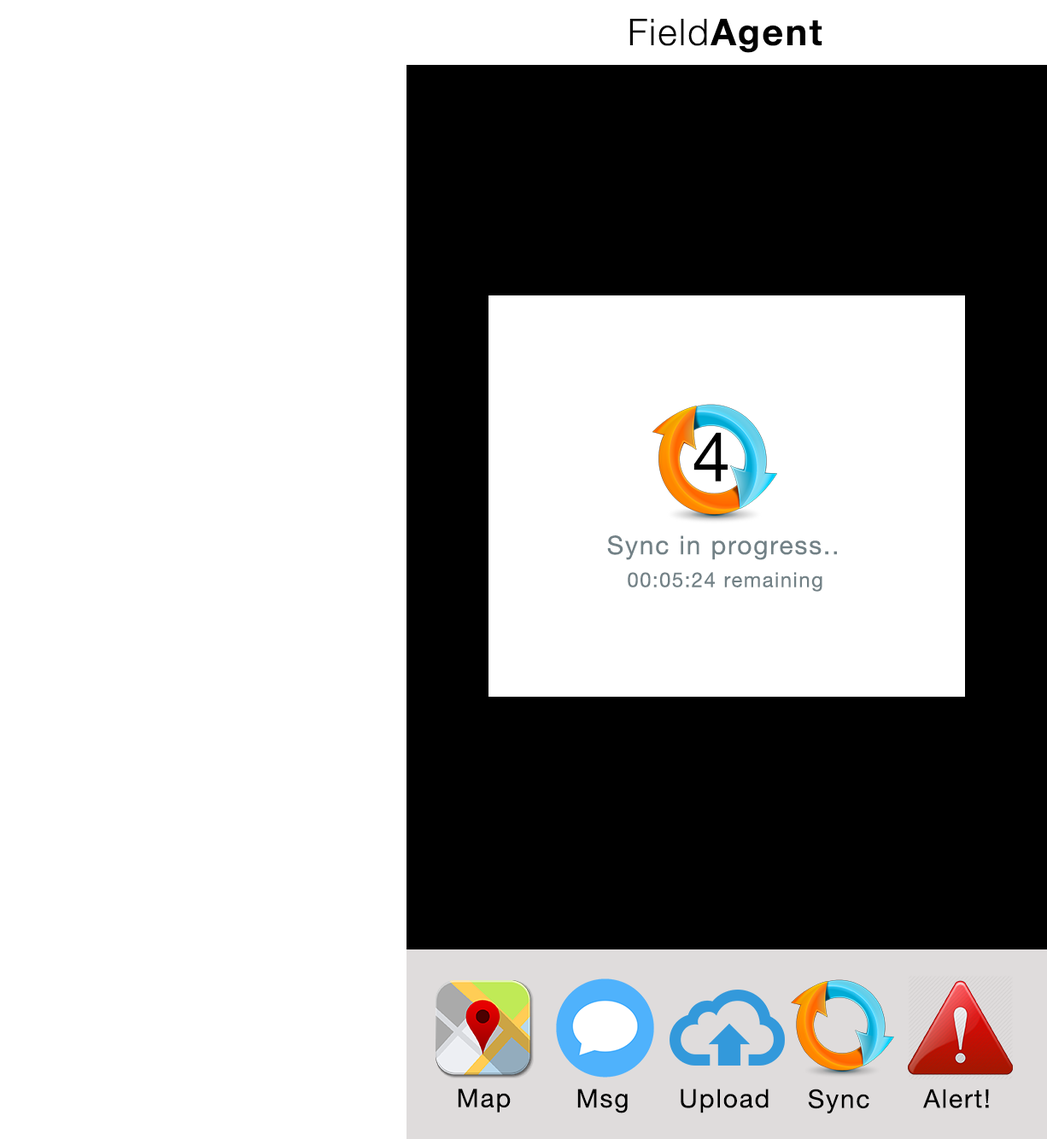
<style>
.page{position:relative;width:1047px;height:1139px;background:#ffffff}
.page>*{position:absolute;margin:0}
.t1{font:36.9px "HelveticaNeue-Light";letter-spacing:0.06em;color:#000000}
.t2{font:36.9px "HelveticaNeue-Bold";letter-spacing:0.06em;color:#000000}
.t3{font:68.3px "HelveticaNeue";letter-spacing:0.06em;color:#000000}
.t4{font:25.6px "HelveticaNeue";letter-spacing:0.06em;color:#728186}
.t5{font:25.6px "HelveticaNeue";letter-spacing:0.06em;color:#ffffff}
.t6{font:20.5px "HelveticaNeue";letter-spacing:0.06em;color:#728186}
.t7{font:25.6px "HelveticaNeue";letter-spacing:0.06em;color:#000000}
</style>
<div class="page">
<p class="t1" style="left:629px;top:19px;width:193px;height:34px">Field<span class="t2">Agent</span></p>
<p class="t3" style="left:693px;top:432px;width:35px;height:50px">4</p>
<p class="t4" style="left:607px;top:535px;width:239px;height:25px">Sync in progress..<span class="t5">.</span></p>
<p class="t6" style="left:628px;top:572px;width:194px;height:20px">00:05:24 remaining</p>
<p class="t7" style="left:458px;top:1089px;width:53px;height:24px">Map</p>
<p class="t7" style="left:577px;top:1089px;width:51px;height:24px">Msg</p>
<p class="t7" style="left:681px;top:1089px;width:87px;height:24px">Upload</p>
<p class="t7" style="left:808px;top:1089px;width:61px;height:24px">Sync</p>
<p class="t7" style="left:923px;top:1089px;width:66px;height:19px">Alert!</p>
</div>
